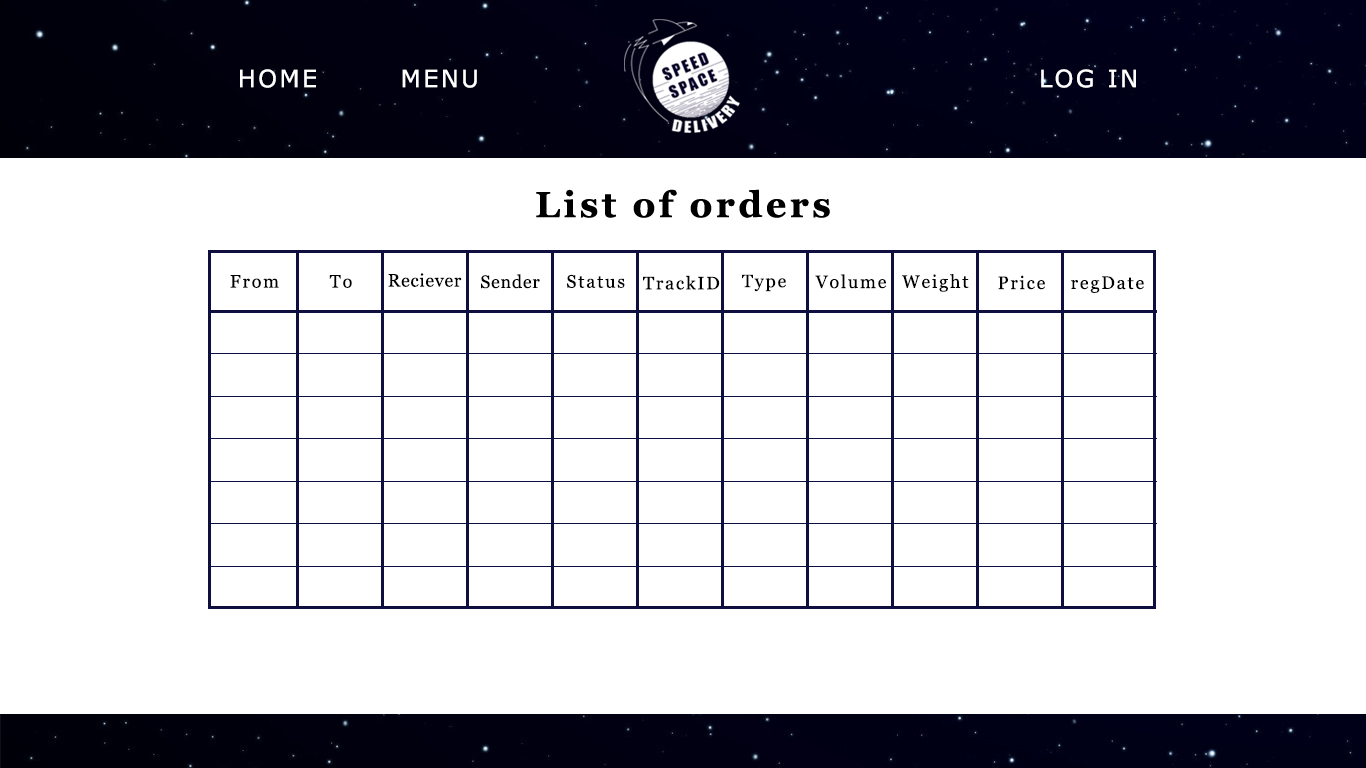
<style>
.page{position:relative;width:1366px;height:768px;background:#ffffff}
.page>*{position:absolute;margin:0}
.t1{font:24px "Verdana";letter-spacing:0.1em;color:#ffffff}
.t2{font:18px "Georgia";letter-spacing:0.1em;color:#000000}
.t3{font:18px "Georgia";letter-spacing:0.04em;color:#000000}
</style>
<div class="page">
<p class="t1" style="left:240px;top:69px;width:76px;height:19px">HOME</p>
<p class="t1" style="left:402px;top:69px;width:75px;height:19px">MENU</p>
<p class="t1" style="left:1041px;top:69px;width:95px;height:19px">LOG IN</p>
<p class="t2" style="left:230px;top:275px;width:49px;height:13px">From</p>
<p class="t2" style="left:329px;top:275px;width:23px;height:13px">To</p>
<p class="t3" style="left:388px;top:273px;width:74px;height:14px">Recieve<span class="t2">r</span></p>
<p class="t3" style="left:481px;top:274px;width:59px;height:15px">Sender</p>
<p class="t2" style="left:567px;top:274px;width:58px;height:14px">Status</p>
<p class="t2" style="left:643px;top:275px;width:77px;height:15px">TrackID</p>
<p class="t2" style="left:742px;top:274px;width:44px;height:18px">Type</p>
<p class="t2" style="left:815px;top:274px;width:72px;height:15px">Volume</p>
<p class="t2" style="left:902px;top:274px;width:67px;height:18px">Weight</p>
<p class="t2" style="left:998px;top:275px;width:47px;height:15px">Price</p>
<p class="t2" style="left:1071px;top:276px;width:73px;height:17px">regDate</p>
</div>
